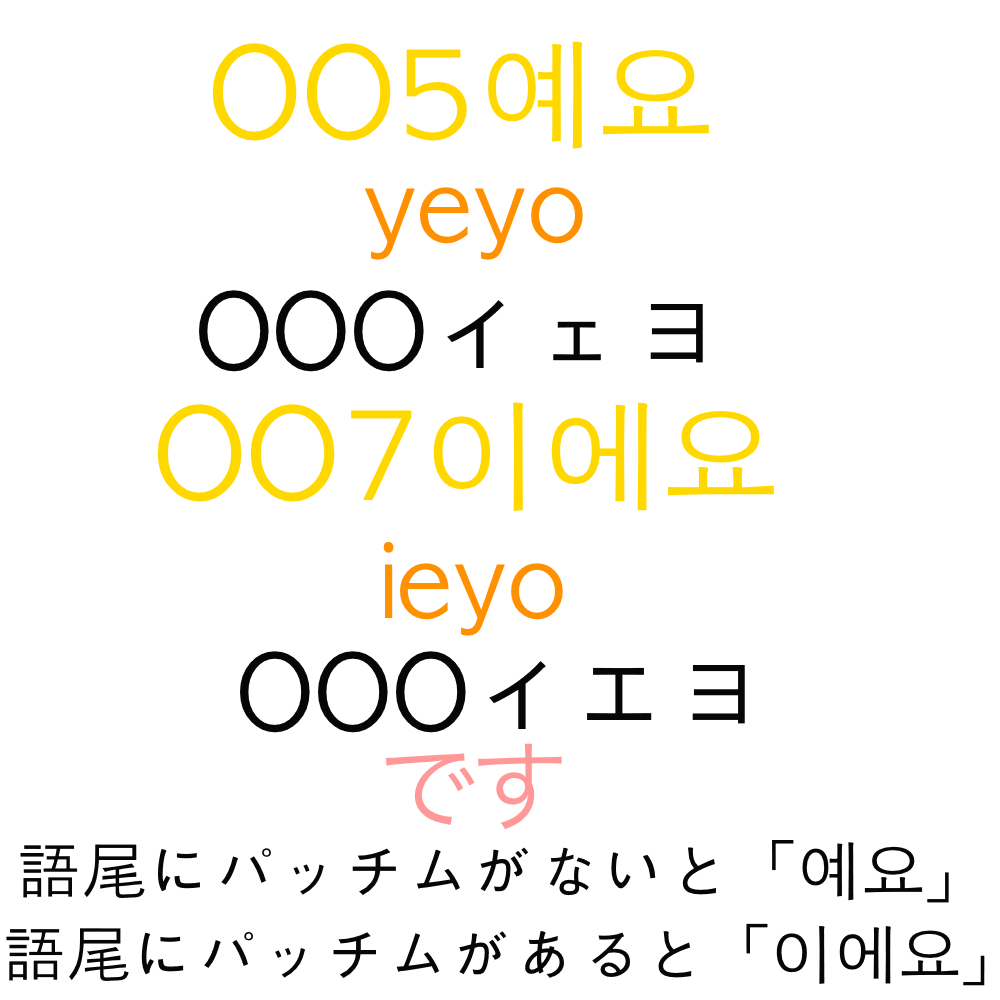
<style>
.page{position:relative;width:1000px;height:1000px;background:#ffffff}
.page>*{position:absolute;margin:0}
.t1{font:120px "AppleGothic";color:#ffd800}
.t2{font:100px "AppleGothic";color:#ff9000}
.t3{font:100px "AppleGothic";color:#060605}
.t4{font:100px "HiraKakuProN-W3";color:#ff9999}
.t5{font:65px "AppleGothic";color:#060605}
.t6{font:64px "AppleGothic";color:#060605}
</style>
<div class="page">
<p class="t1" style="left:212px;top:41px;width:497px;height:108px">OO5예요</p>
<p class="t2" style="left:364px;top:187px;width:219px;height:73px">yeyo</p>
<p class="t3" style="left:199px;top:290px;width:504px;height:82px">OOOイェヨ</p>
<p class="t1" style="left:157px;top:402px;width:617px;height:109px">OO7이에요</p>
<p class="t2" style="left:383px;top:541px;width:180px;height:95px">ieyo</p>
<p class="t3" style="left:240px;top:651px;width:505px;height:82px">OOOイエヨ</p>
<p class="t4" style="left:386px;top:743px;width:176px;height:87px">です</p>
<p class="t5" style="left:20px;top:840px;width:929px;height:63px">語尾にパッチムがないと「예요」</p>
<p class="t6" style="left:6px;top:923px;width:979px;height:63px">語尾にパッチムがあると「이에요」</p>
</div>
